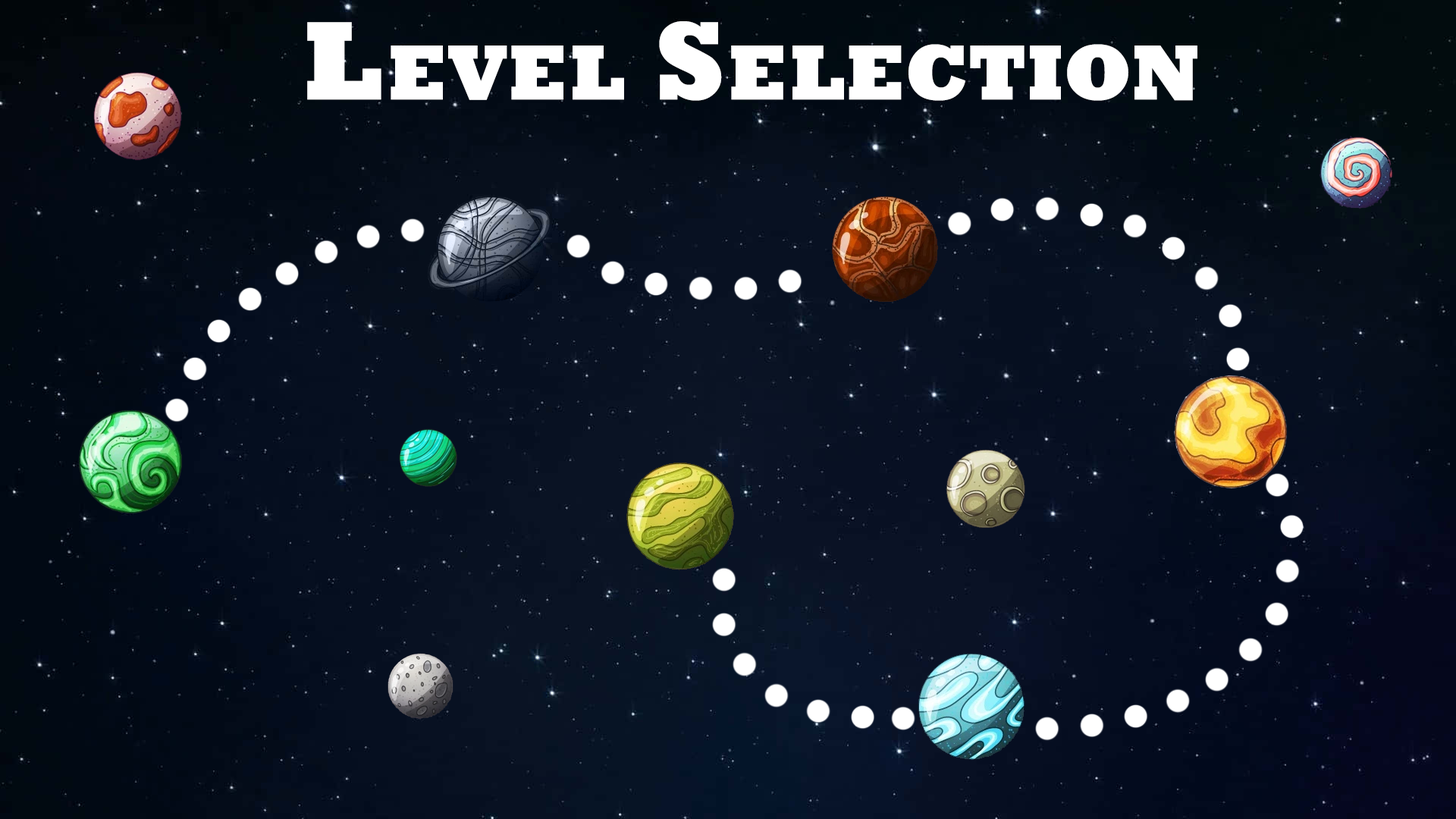
<style>
.page{position:relative;width:1456px;height:819px}
.page>*{position:absolute;margin:0}
.t1{font:113.7px "Rockwell-ExtraBold";letter-spacing:0.005em;color:#ffffff;font-variant:small-caps}
</style>
<div class="page">
<p class="t1" style="left:307px;top:21px;width:890px;height:80px">Level Selection</p>
</div>
